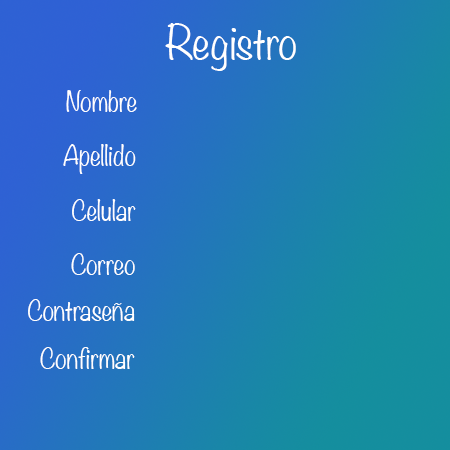
<style>
.page{position:relative;width:450px;height:450px}
.page>*{position:absolute;margin:0}
.t1{font:41.7px "Noteworthy-Light";color:#ffffff}
.t2{font:25px "Noteworthy-Light";color:#ffffff}
</style>
<div class="page">
<p class="t1" style="left:165px;top:23px;width:131px;height:48px">Registro</p>
<p class="t2" style="left:66px;top:90px;width:71px;height:22px">Nombre</p>
<p class="t2" style="left:63px;top:144px;width:73px;height:30px">Apellido</p>
<p class="t2" style="left:72px;top:199px;width:64px;height:22px">Celular</p>
<p class="t2" style="left:71px;top:253px;width:64px;height:22px">Correo</p>
<p class="t2" style="left:28px;top:299px;width:107px;height:22px">Contraseña</p>
<p class="t2" style="left:40px;top:347px;width:95px;height:22px">Confirmar</p>
</div>
